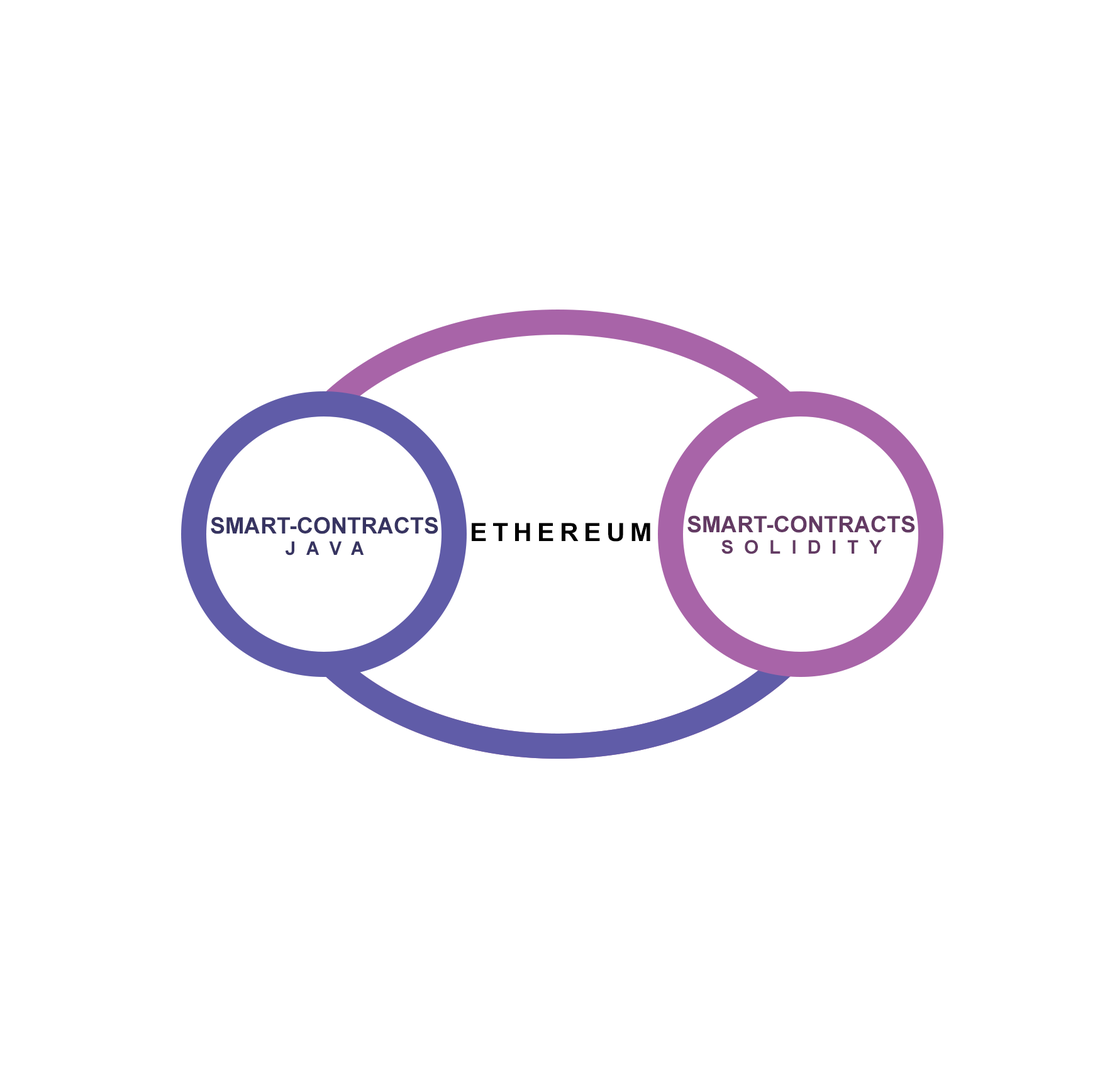
<style>
.page{position:relative;width:1117px;height:1067px;background:#ffffff}
.page>*{position:absolute;margin:0}
.t1{font:22.7px/7.6px "Arial-BoldMT";color:#373461}
.t2{font:18.9px/21.4px "Arial-BoldMT";letter-spacing:0.56em;color:#373461}
.t3{font:22.7px/7.6px "Arial-BoldMT";color:#633a63}
.t4{font:18.9px/21.4px "Arial-BoldMT";letter-spacing:0.56em;color:#633a63}
.t5{font:25.1px "Arial-BoldMT";letter-spacing:0.2em;color:#000000;scale:1.03 1}
</style>
<div class="page">
<p class="t1" style="left:211px;top:517px;width:228px;height:39px;text-align:center">SMART-CONTRACTS<br><span class="t2">JAVA</span></p>
<p class="t3" style="left:688px;top:515px;width:227px;height:39px;text-align:center">SMART-CONTRACTS<br><span class="t4">SOLIDITY</span></p>
<p class="t5" style="left:472px;top:523px;width:179px;height:19px">ETHEREUM</p>
</div>
